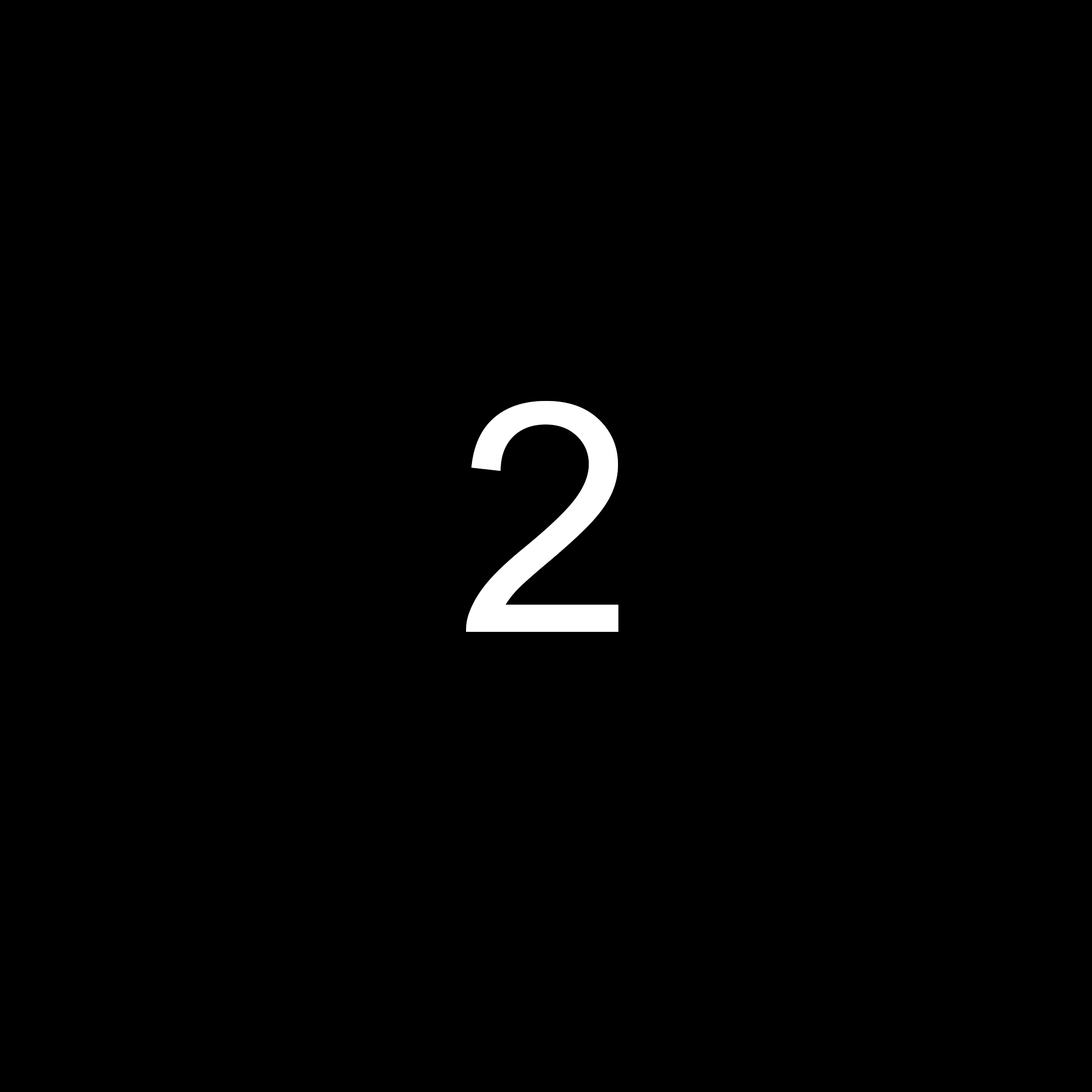
<style>
.page{position:relative;width:1092px;height:1092px;background:#000000}
.page>*{position:absolute;margin:0}
.t1{font:321.3px "ArialMT";color:#ffffff}
</style>
<div class="page">
<p class="t1" style="left:466px;top:401px;width:153px;height:231px">2</p>
</div>
